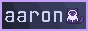
<style>
.page{position:relative;width:88px;height:31px;background:#2f334d}
.page>*{position:absolute;margin:0}
.t1{font:20px "JetBrainsMonoRoman-Light";color:#cad3f5}
</style>
<div class="page">
<p class="t1" style="left:5px;top:10px;width:58px;height:13px">aaron</p>
</div>
